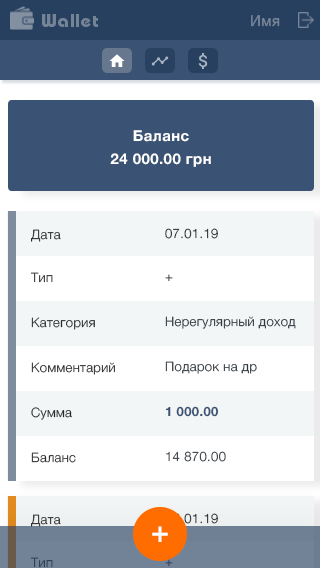
<style>
.page{position:relative;width:320px;height:568px;background:#ffffff}
.page>*{position:absolute;margin:0}
.t1{font:18px "BauhausC-Bold";letter-spacing:0.06em;color:#758397}
.t2{font:15px "HelveticaNeueCyr-Roman";letter-spacing:0.03em;color:#79879a}
.t3{font:15px "HelveticaNeueCyr-Bold";letter-spacing:0.03em;color:#ffffff}
.t4{font:13px "HelveticaNeueCyr-Light";letter-spacing:0.03em;color:#282828}
.t5{font:13px "HelveticaNeueCyr-Light";letter-spacing:0.03em}
.t6{font:13px "HelveticaNeueCyr-Light";letter-spacing:0.03em;color:#2c353e}
.t7{font:13px "HelveticaNeueCyr-Bold";letter-spacing:0.03em;color:#3a5374}
.t8{font:30px "HelveticaNeueCyr-Bold";letter-spacing:0.03em;color:#ffffff}
</style>
<div class="page">
<p class="t1" style="left:42px;top:14px;width:56px;height:13px">Wallet</p>
<p class="t2" style="left:251px;top:15px;width:29px;height:12px">Имя</p>
<p class="t3" style="left:133px;top:130px;width:56px;height:12px">Баланс</p>
<p class="t3" style="left:110px;top:153px;width:101px;height:14px">24 000.00 грн</p>
<p class="t4" style="left:31px;top:229px;width:30px;height:13px">Дата</p>
<p class="t4" style="left:165px;top:228px;width:53px;height:11px">07.01.19</p>
<p class="t5" style="left:30px;top:272px;width:23px;height:11px">Тип</p>
<p class="t5" style="left:165px;top:274px;width:8px;height:8px">+</p>
<p class="t4" style="left:31px;top:317px;width:64px;height:13px">Категория</p>
<p class="t6" style="left:165px;top:316px;width:131px;height:13px">Нерегулярный доход</p>
<p class="t4" style="left:31px;top:362px;width:84px;height:13px">Комментарий</p>
<p class="t6" style="left:165px;top:361px;width:92px;height:13px">Подарок на др</p>
<p class="t4" style="left:31px;top:407px;width:41px;height:13px">Сумма</p>
<p class="t7" style="left:165px;top:406px;width:54px;height:11px">1 000.00</p>
<p class="t4" style="left:31px;top:452px;width:45px;height:11px">Баланс</p>
<p class="t6" style="left:166px;top:451px;width:60px;height:11px">14 870.00</p>
<p class="t4" style="left:31px;top:514px;width:30px;height:13px">Дата</p>
<p class="t4" style="left:165px;top:513px;width:53px;height:11px">07.01.19</p>
<p class="t8" style="left:152px;top:526px;width:16px;height:16px">+</p>
<p class="t5" style="left:30px;top:557px;width:23px;height:11px">Тип</p>
<p class="t5" style="left:165px;top:559px;width:8px;height:8px">+</p>
</div>
